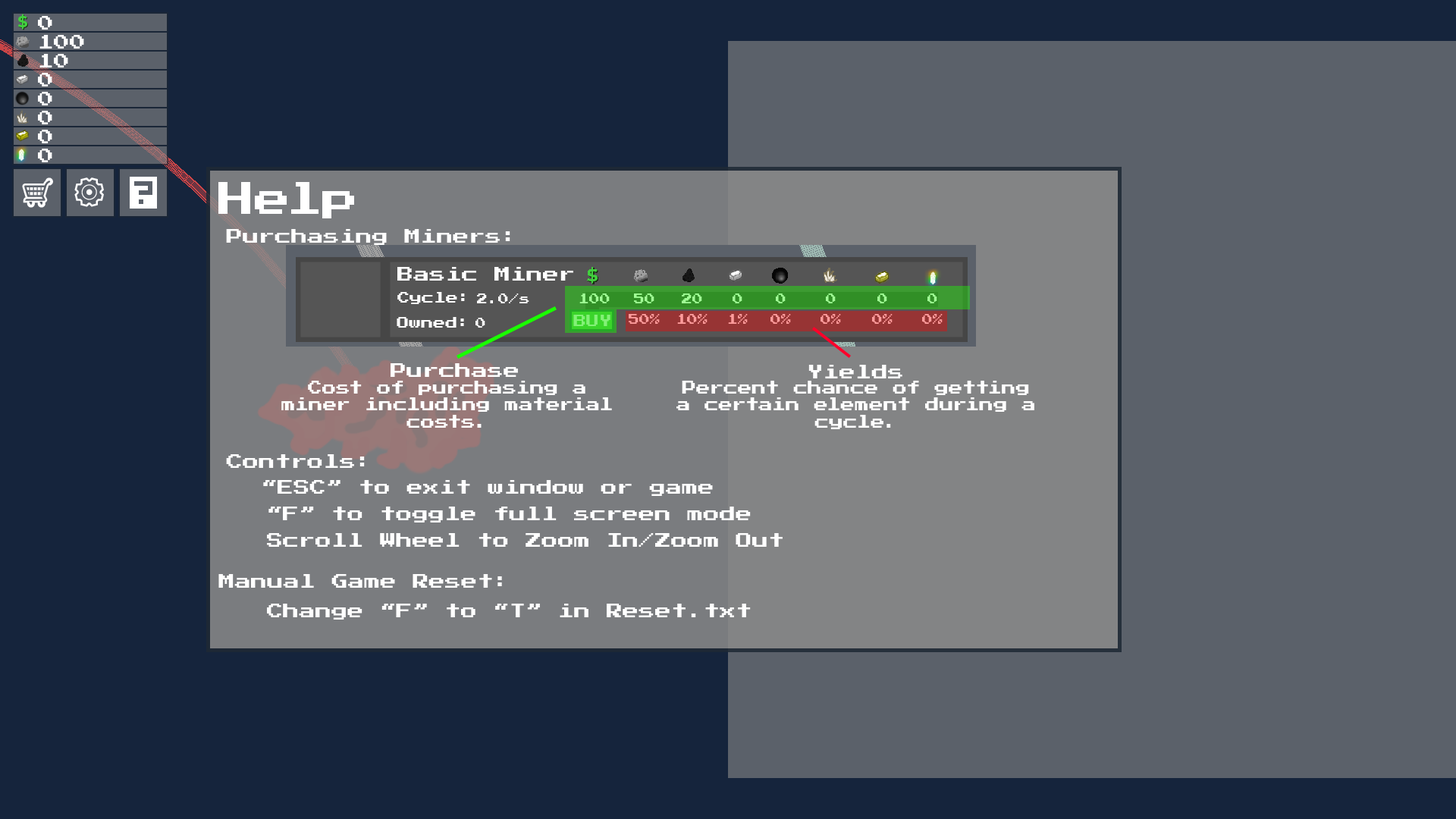
<style>
.page{position:relative;width:1456px;height:819px;background:#5b616a}
.page>*{position:absolute;margin:0}
.t1{font:36.4px "PressStart2P-Regular";color:#ffffff}
.t2{font:16.2px "PressStart2P-Regular";color:#ffffff}
.t3{font:14.2px "PressStart2P-Regular";color:#ffffff}
</style>
<div class="page">
<p class="t1" style="left:218px;top:182px;width:136px;height:36px">Help</p>
<p class="t2" style="left:226px;top:229px;width:284px;height:16px">Purchasing Miners:</p>
<p class="t2" style="left:391px;top:363px;width:127px;height:14px">Purchase</p>
<p class="t2" style="left:808px;top:365px;width:94px;height:13px">Yields</p>
<p class="t3" style="left:281px;top:381px;width:331px;height:47px;text-align:center">Cost of purchasing a<br>miner including material<br>costs.</p>
<p class="t3" style="left:676px;top:381px;width:358px;height:48px;text-align:center">Percent chance of getting<br>a certain element during a<br>cycle.</p>
<p class="t2" style="left:226px;top:454px;width:139px;height:14px">Controls:</p>
<p class="t2" style="left:263px;top:480px;width:450px;height:16px">“ESC” to exit window or game</p>
<p class="t2" style="left:268px;top:507px;width:483px;height:15px">“F” to toggle full screen mode</p>
<p class="t2" style="left:267px;top:533px;width:516px;height:14px">Scroll Wheel to Zoom In/Zoom Out</p>
<p class="t2" style="left:218px;top:574px;width:284px;height:14px">Manual Game Reset:</p>
<p class="t2" style="left:267px;top:604px;width:484px;height:16px">Change “F” to “T” in Reset.txt</p>
</div>
